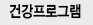
<style>
.page{position:relative;width:93px;height:25px;background:#ebebeb}
.page>*{position:absolute;margin:0}
.t1{font:16px "YDIYGO340";color:#000000;scale:0.82 1}
</style>
<div class="page">
<p class="t1" style="left:9px;top:4px;width:72px;height:15px">건강프로그램</p>
</div>
